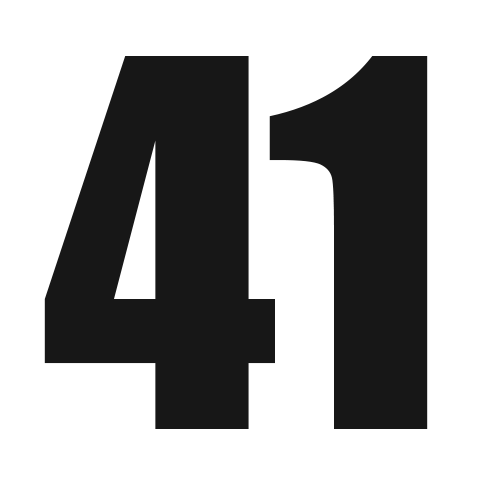
<style>
.page{position:relative;width:480px;height:480px;background:#ffffff}
.page>*{position:absolute;margin:0}
.t1{font:472.3px "Impact";color:#171717}
</style>
<div class="page">
<p class="t1" style="left:44px;top:56px;width:384px;height:373px">41</p>
</div>
